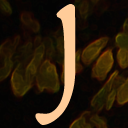
<style>
.page{position:relative;width:128px;height:128px}
.page>*{position:absolute;margin:0}
.t1{font:160px "Herculanum";color:#ffcc99}
</style>
<div class="page">
<p class="t1" style="left:35px;top:4px;width:41px;height:121px">J</p>
</div>
